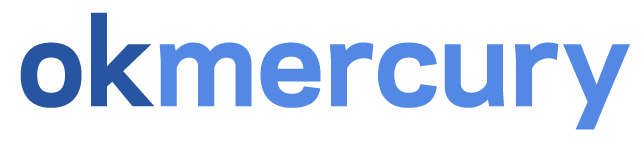
<style>
.page{position:relative;width:644px;height:144px;background:#ffffff}
.page>*{position:absolute;margin:0}
.t1{font:200px "GalaxiePolaris-Bold";color:#5389e5}
.t2{font:200px "GalaxiePolaris-Bold";color:#2855a2}
</style>
<div class="page">
<p class="t1" style="left:20px;top:12px;width:610px;height:118px"><span class="t2">ok</span>mercury</p>
</div>
